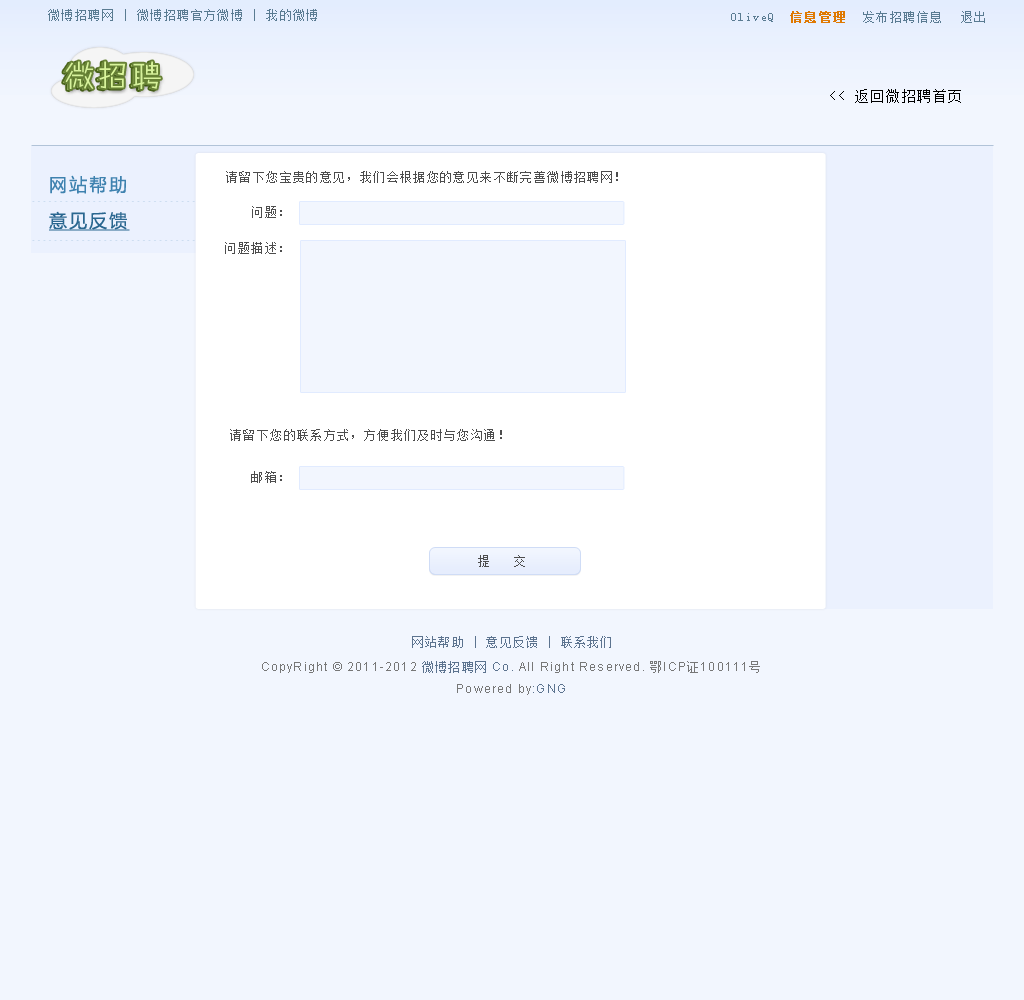
<style>
.page{position:relative;width:1024px;height:1000px;background:#f2f6fe}
.page>*{position:absolute;margin:0}
.t1{font:12px "SimSun";letter-spacing:0.115em;color:#5a7b92}
.t2{font:12px "SimSun";letter-spacing:0.115em;color:#df7902;font-weight:bold}
.t3{font:30px "FZZHYJW--GB1-0";letter-spacing:0.115em;color:#d9ff97}
.t4{font:14px "SimSun";letter-spacing:0.115em;color:#000000}
.t5{font:12px "SimSun";letter-spacing:0.115em;color:#4d4d4d}
.t6{font:18px "MicrosoftYaHei";letter-spacing:0.115em;color:#3e82af}
.t7{font:12px/36px "SimSun";letter-spacing:0.115em;color:#4d4d4d}
.t8{font:18px "MicrosoftYaHei";letter-spacing:0.115em;color:#2a6790;text-decoration:underline}
.t9{font:12px "SimSun";letter-spacing:0.1em;color:#5c738f}
.t10{font:12px/22px "ArialMT";letter-spacing:0.1em;color:#777777}
.t11{font:12px/22px "SimSun";letter-spacing:0.1em;color:#5c738f}
.t12{font:12px/22px "ArialMT";letter-spacing:0.1em;color:#5c738f}
.t13{font:12px/22px "SimSun";letter-spacing:0.1em;color:#777777}
</style>
<div class="page">
<p class="t1" style="left:48px;top:9px;width:269px;height:12px">微博招聘网 | 微博招聘官方微博 | 我的微博</p>
<p class="t1" style="left:731px;top:11px;width:114px;height:12px">OliveQ  <span class="t2">信息管理</span></p>
<p class="t1" style="left:863px;top:11px;width:78px;height:12px">发布招聘信息</p>
<p class="t1" style="left:961px;top:11px;width:24px;height:12px">退出</p>
<p class="t3" style="left:65px;top:61px;width:96px;height:28px">微招聘</p>
<p class="t4" style="left:830px;top:89px;width:131px;height:14px">&lt;&lt; 返回微招聘首页</p>
<p class="t5" style="left:226px;top:171px;width:392px;height:12px">请留下您宝贵的意见，我们会根据您的意见来不断完善微博招聘网！</p>
<p class="t6" style="left:50px;top:175px;width:76px;height:19px">网站帮助</p>
<p class="t7" style="left:225px;top:206px;width:57px;height:48px;text-align:right">问题：<br>问题描述：</p>
<p class="t8" style="left:49px;top:211px;width:81px;height:20px">意见反馈</p>
<p class="t5" style="left:230px;top:429px;width:272px;height:12px">请留下您的联系方式，方便我们及时与您沟通！</p>
<p class="t5" style="left:251px;top:471px;width:31px;height:12px">邮箱：</p>
<p class="t5" style="left:478px;top:555px;width:47px;height:12px">提   交</p>
<p class="t9" style="left:412px;top:636px;width:199px;height:12px">网站帮助 | 意见反馈 | 联系我们</p>
<p class="t10" style="left:262px;top:661px;width:498px;height:34px;text-align:center">CopyRight © 2011-2012 <span class="t11">微博招聘网</span><span class="t12"> Co. </span>All Right Reserved. <span class="t13">鄂</span>ICP<span class="t13">证</span>100111<span class="t13">号<br></span>Powered by<span class="t12">:GNG</span></p>
</div>
